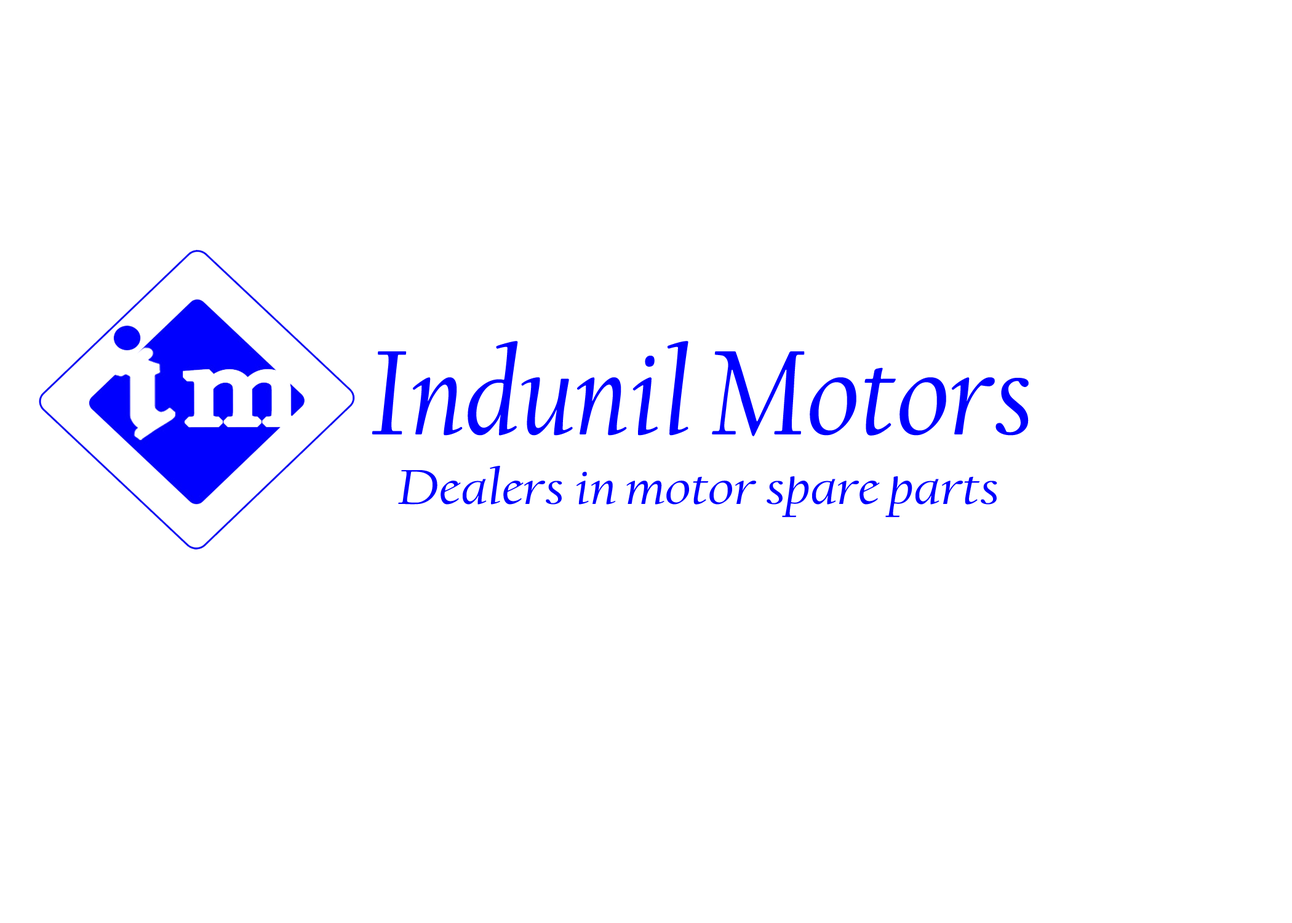
<style>
.page{position:relative;width:1292px;height:923px;background:#ffffff}
.page>*{position:absolute;margin:0}
.t1{font:125.3px "CalifornianFB-Italic";color:#0000fe}
.t2{font:51.2px "CalifornianFB-Italic";color:#0000fe;scale:1.2 1}
</style>
<div class="page">
<p class="t1" style="left:372px;top:341px;width:657px;height:95px">Indunil Motors</p>
<p class="t2" style="left:398px;top:466px;width:599px;height:51px">Dealers in motor spare parts</p>
</div>
